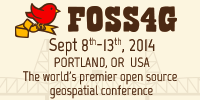
<style>
.page{position:relative;width:200px;height:100px;background:#fcf5df}
.page>*{position:absolute;margin:0}
.t1{font:18.1px "Marvel-Bold";color:#4a2913}
.t2{font:18.1px "Marvel-Bold";color:#4a2913;text-transform:uppercase}
.t3{font:23.1px "Marvel-Bold";color:#4a2913;text-transform:uppercase}
.t4{font:23.4px/13.9px "Marvel-Bold";color:#4a2913}
</style>
<div class="page">
<p class="t1" style="left:49px;top:37px;width:106px;height:19px">Sept <span class="t2">8</span>th<span class="t2">-13</span>th, 2014</p>
<p class="t3" style="left:54px;top:57px;width:96px;height:12px">Portland, OR  USA</p>
<p class="t4" style="left:23px;top:71px;width:154px;height:28px;text-align:center">The world's premier open source <br>geospatial conference</p>
</div>
